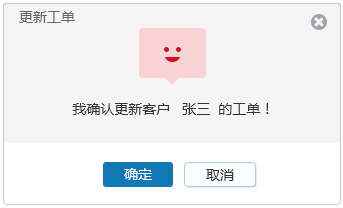
<style>
.page{position:relative;width:343px;height:208px;background:#f5f5f5}
.page>*{position:absolute;margin:0}
.t1{font:14px "MicrosoftYaHei";color:#666666}
.t2{font:14px "MicrosoftYaHei";color:#333333}
.t3{font:14px "MicrosoftYaHei";color:#ffffff}
</style>
<div class="page">
<p class="t1" style="left:19px;top:11px;width:56px;height:12px">更新工单</p>
<p class="t2" style="left:72px;top:103px;width:197px;height:12px">我确认更新客户   张三  的工单！</p>
<p class="t3" style="left:124px;top:168px;width:28px;height:12px">确定</p>
<p class="t2" style="left:206px;top:169px;width:28px;height:12px">取消</p>
</div>
